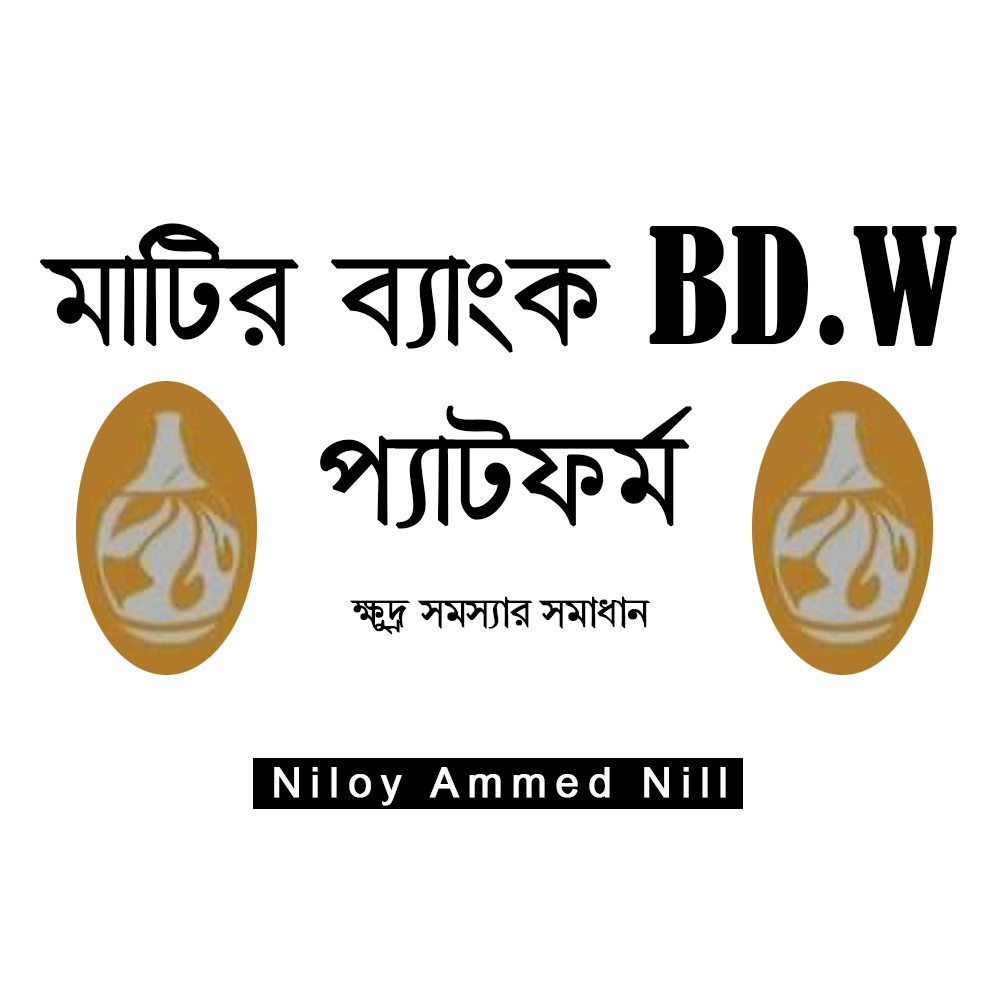
<style>
.page{position:relative;width:1000px;height:1000px;background:#ffffff}
.page>*{position:absolute;margin:0}
.t1{font:150.2px "JaJaDiMJ-Regular";color:#000000;font-weight:bold}
.t2{font:150.2px "BernardMT-Condensed";color:#000000}
.t3{font:41.7px "GangaSagarMJ-Regular";color:#000000;font-weight:bold}
.t4{font:41.7px "ArialMT";letter-spacing:0.2em;color:#fcfcfc;font-weight:bold}
</style>
<div class="page">
<p class="t1" style="left:39px;top:223px;width:918px;height:306px;text-align:center">gvwUi e¨vsK <span class="t2">BD.W<br></span>c­¨vUdg©</p>
<p class="t3" style="left:350px;top:596px;width:300px;height:39px">¶y`« mgm¨vi mgvavb</p>
<p class="t4" style="left:274px;top:767px;width:452px;height:39px">Niloy Ammed Nill</p>
</div>
